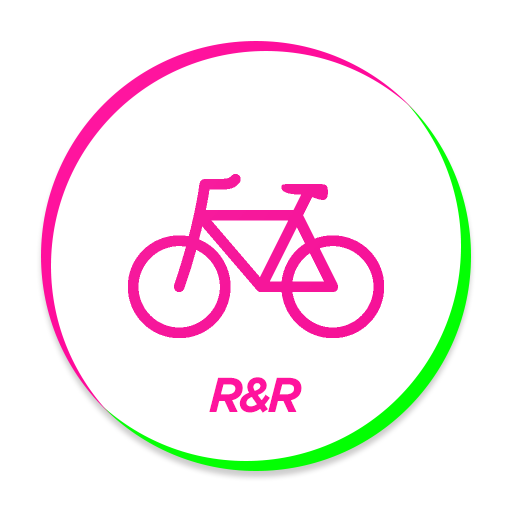
<style>
.page{position:relative;width:512px;height:512px;background:#ffffff}
.page>*{position:absolute;margin:0}
.t1{font:49px "Gotham-BoldItalic";letter-spacing:-0.082em;color:#ff0d9b;scale:0.95 1}
</style>
<div class="page">
<p class="t1" style="left:209px;top:377px;width:93px;height:36px">R&amp;R</p>
</div>
